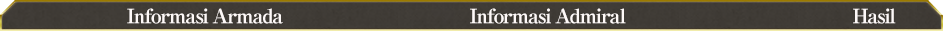
<style>
.page{position:relative;width:943px;height:31px}
.page>*{position:absolute;margin:0}
.t1{font:20px "RyuminPro-ExBold";letter-spacing:-0.08em;color:#fef9f8}
</style>
<div class="page">
<p class="t1" style="left:127px;top:8px;width:769px;height:16px">Informasi Armada                                     Informasi Admiral                                             Hasil</p>
</div>
